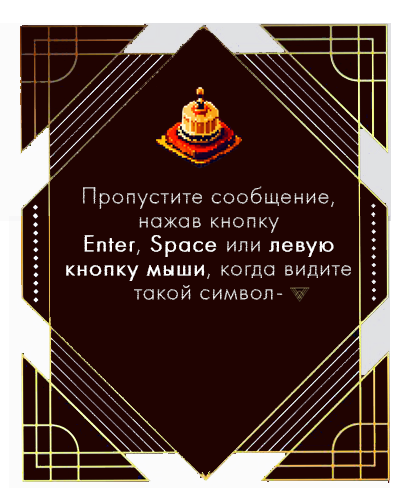
<style>
.page{position:relative;width:400px;height:500px;background:#200301}
.page>*{position:absolute;margin:0}
.t1{font:24px/24px "SchistLight";letter-spacing:0.05em;color:#ffffff}
.t2{font:24px/24px "SchistLight";letter-spacing:0.05em;color:#ffffff;font-weight:bold}
</style>
<div class="page">
<p class="t1" style="left:66px;top:186px;width:285px;height:114px;text-align:center">Пропустите сообщение, нажав кнопку <br><span class="t2">Enter</span>, <span class="t2">Space </span>или <span class="t2">левую кнопку мыши</span>, когда видите такой символ-</p>
</div>
